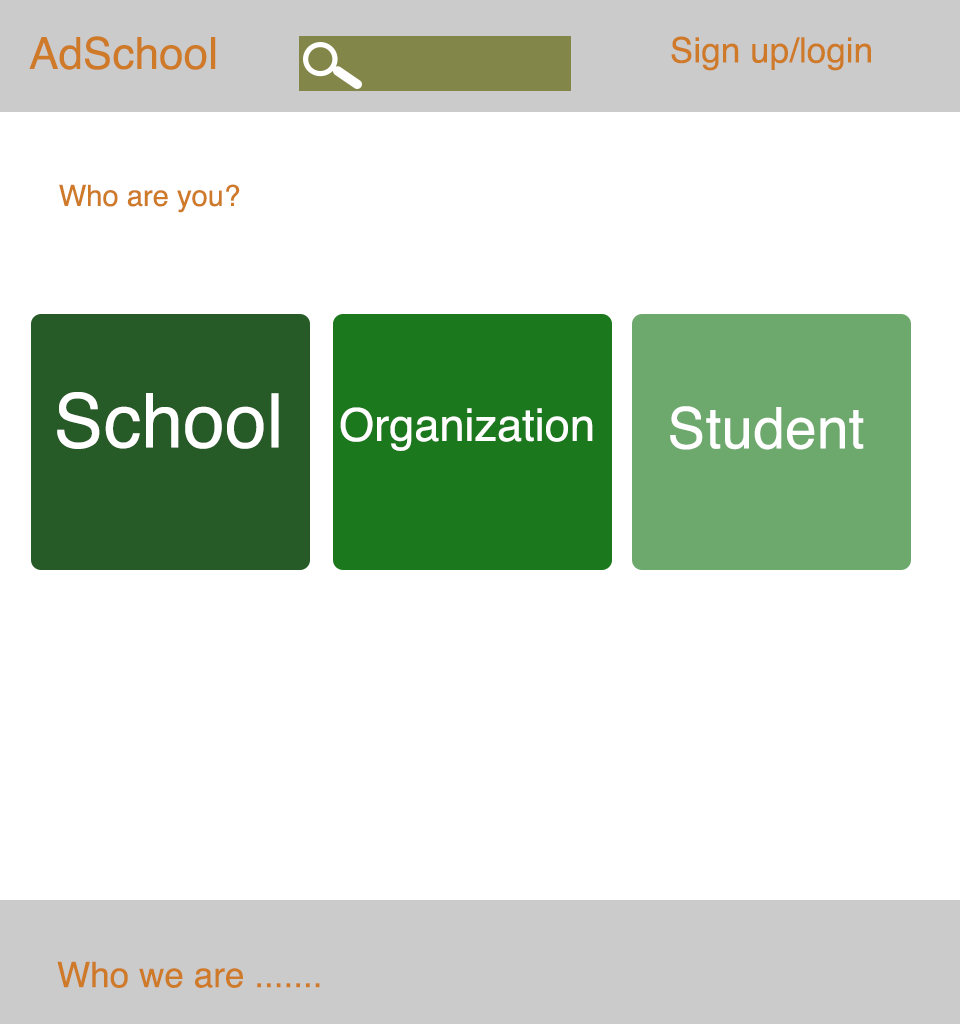
<style>
.page{position:relative;width:960px;height:1024px;background:#ffffff}
.page>*{position:absolute;margin:0}
.t1{font:44px "Helvetica";color:#cf7a29}
.t2{font:35.1px "Helvetica";color:#cf7a29}
.t3{font:29.1px "Helvetica";color:#cf7a29}
.t4{font:75.1px "Helvetica";color:#ffffff}
.t5{font:45.1px "Helvetica";color:#ffffff}
.t6{font:57.1px "Helvetica";color:#ffffff}
</style>
<div class="page">
<p class="t1" style="left:29px;top:36px;width:187px;height:34px">AdSchool</p>
<p class="t2" style="left:671px;top:36px;width:200px;height:35px">Sign up/login</p>
<p class="t3" style="left:59px;top:184px;width:181px;height:29px">Who are you?</p>
<p class="t4" style="left:57px;top:392px;width:222px;height:57px">School</p>
<p class="t5" style="left:340px;top:407px;width:253px;height:44px">Organization</p>
<p class="t6" style="left:670px;top:406px;width:194px;height:44px">Student</p>
<p class="t2" style="left:57px;top:961px;width:263px;height:27px">Who we are .......</p>
</div>
